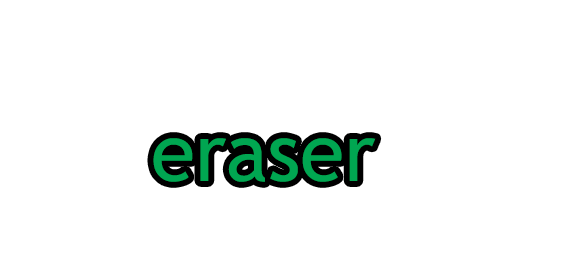
<style>
.page{position:relative;width:571px;height:268px;background:#ffffff}
.page>*{position:absolute;margin:0}
.t1{font:80px "TrebuchetMS";color:#00a651}
</style>
<div class="page">
<p class="t1" style="left:153px;top:138px;width:223px;height:44px">eraser</p>
</div>
